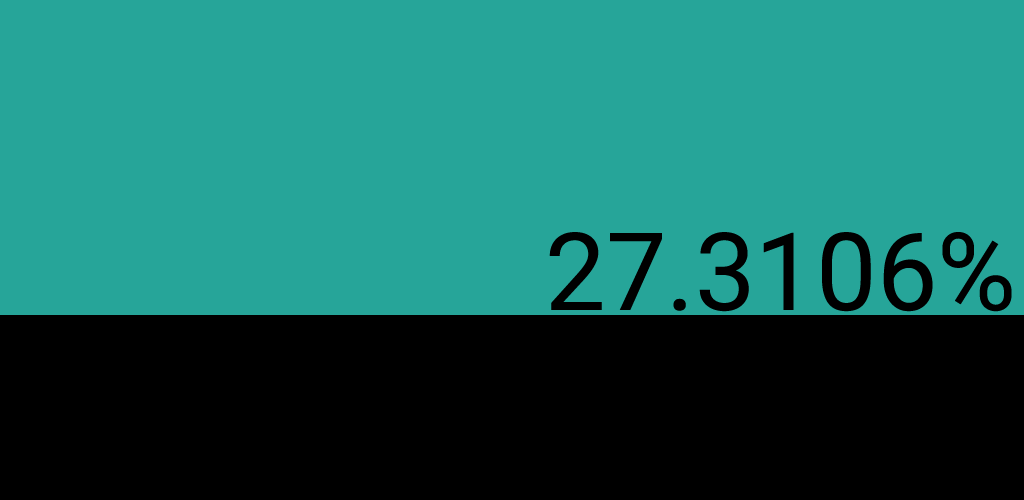
<style>
.page{position:relative;width:1024px;height:500px;background:#26a599}
.page>*{position:absolute;margin:0}
.t1{font:108px "Roboto-Regular";color:#000000}
</style>
<div class="page">
<p class="t1" style="left:549px;top:232px;width:463px;height:80px">27.3106%</p>
</div>
